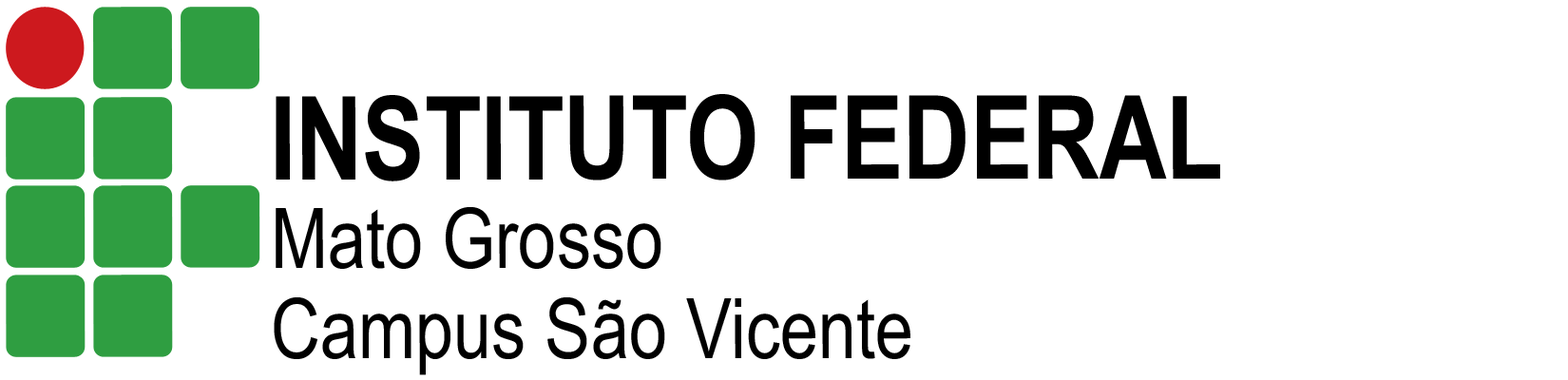
<style>
.page{position:relative;width:1568px;height:380px;background:#ffffff}
.page>*{position:absolute;margin:0}
.t1{font:115.9px "ArialNarrow-Bold";color:#000000}
.t2{font:83.6px "ArialNarrow";color:#000000}
</style>
<div class="page">
<p class="t1" style="left:276px;top:94px;width:944px;height:88px">INSTITUTO FEDERAL</p>
<p class="t2" style="left:276px;top:207px;width:385px;height:62px">Mato Grosso</p>
<p class="t2" style="left:274px;top:297px;width:636px;height:78px">Campus São Vicente</p>
</div>
